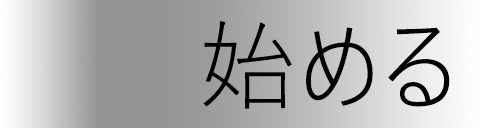
<style>
.page{position:relative;width:480px;height:128px}
.page>*{position:absolute;margin:0}
.t1{font:98px "YuGothicUI-Light";color:#000000;font-weight:bold}
</style>
<div class="page">
<p class="t1" style="left:203px;top:21px;width:247px;height:88px">始める</p>
</div>
